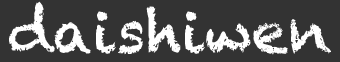
<style>
.page{position:relative;width:340px;height:62px;background:#333333}
.page>*{position:absolute;margin:0}
.t1{font:58.3px "Chalkduster";color:#ffffff}
</style>
<div class="page">
<p class="t1" style="left:9px;top:1px;width:322px;height:54px">daishiwen</p>
</div>
